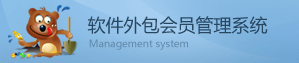
<style>
.page{position:relative;width:299px;height:63px}
.page>*{position:absolute;margin:0}
.t1{font:18px "MicrosoftYaHei";color:#284761}
.t2{font:10px "MicrosoftYaHei";color:#6089aa}
</style>
<div class="page">
<p class="t1" style="left:87px;top:16px;width:181px;height:18px">软件外包会员管理系统</p>
<p class="t2" style="left:89px;top:39px;width:99px;height:11px">Management system</p>
</div>
